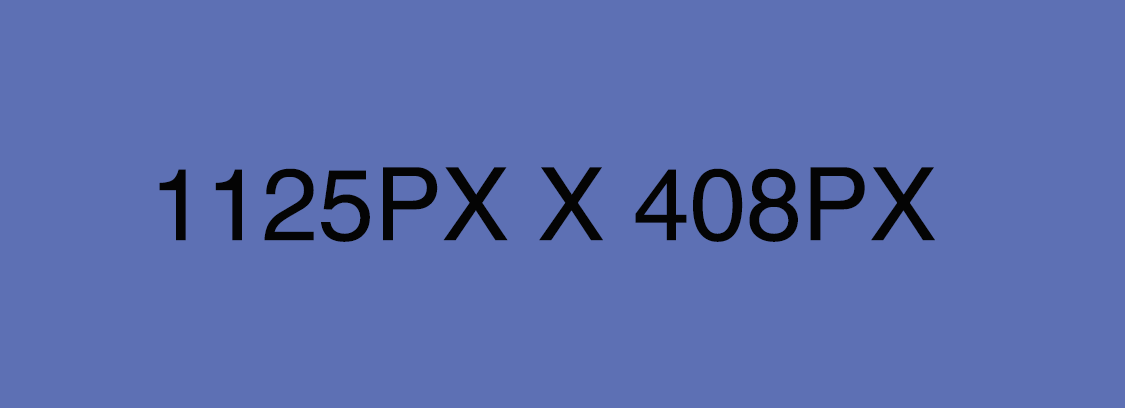
<style>
.page{position:relative;width:1125px;height:408px;background:#5d70b4}
.page>*{position:absolute;margin:0}
.t1{font:101.2px "Helvetica";color:#040404}
</style>
<div class="page">
<p class="t1" style="left:159px;top:167px;width:776px;height:75px">1125PX X 408PX</p>
</div>
